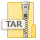
<style>
.page{position:relative;width:40px;height:40px;background:#ffffff}
.page>*{position:absolute;margin:0}
.t1{font:8px "MeiryoUI-Bold";color:#64635e}
</style>
<div class="page">
<p class="t1" style="left:5px;top:20px;width:18px;height:8px">TAR</p>
</div>
